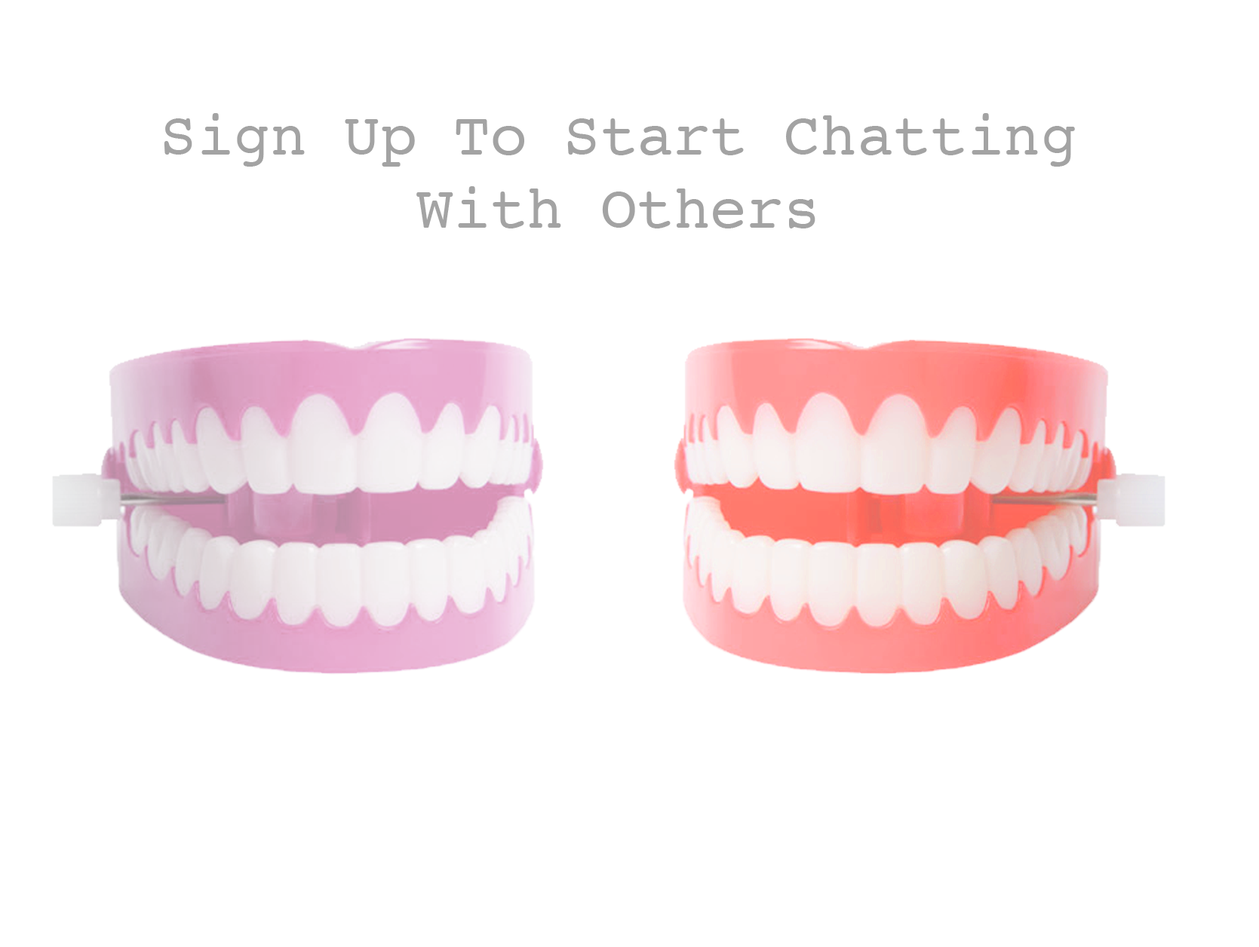
<style>
.page{position:relative;width:1259px;height:947px;background:#ffffff}
.page>*{position:absolute;margin:0}
.t1{font:61.1px "Courier";color:#a3a3a3}
</style>
<div class="page">
<p class="t1" style="left:164px;top:113px;width:911px;height:116px;text-align:center">Sign Up To Start Chatting With Others</p>
</div>
